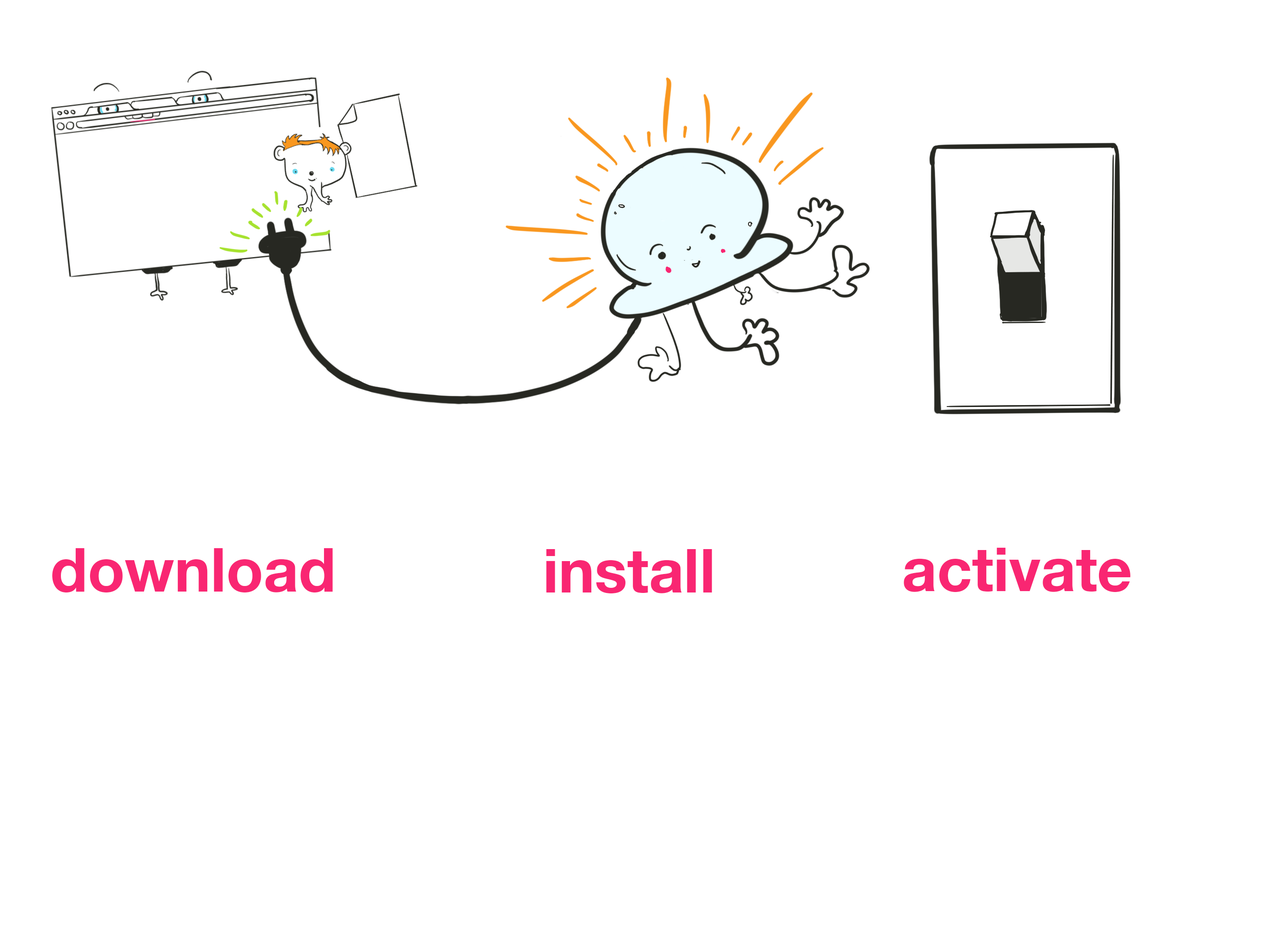
<style>
.page{position:relative;width:1261px;height:945px;background:#ffffff}
.page>*{position:absolute;margin:0}
.t1{font:60.9px "HelveticaNeue-Bold";color:#f92672}
</style>
<div class="page">
<p class="t1" style="left:52px;top:548px;width:281px;height:45px">download</p>
<p class="t1" style="left:546px;top:549px;width:166px;height:45px">install</p>
<p class="t1" style="left:904px;top:548px;width:227px;height:44px">activate</p>
</div>
